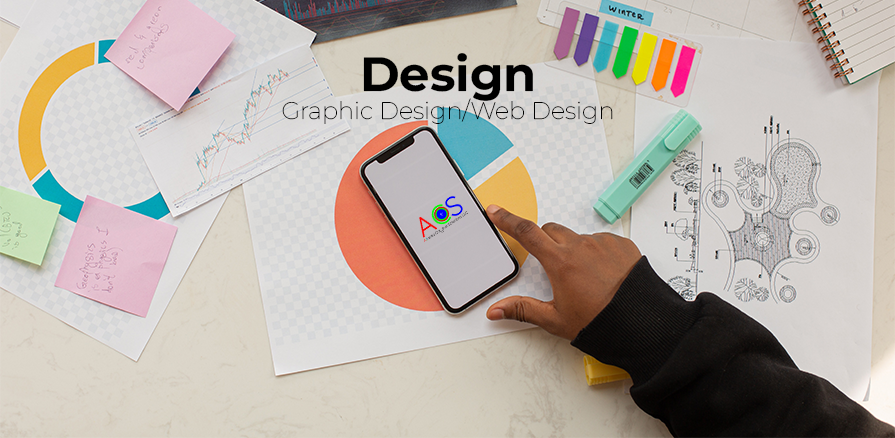
<style>
.page{position:relative;width:895px;height:438px}
.page>*{position:absolute;margin:0}
.t1{font:24px "Montserrat-Thin";color:#000000}
.t2{font:48px "MontserratRoman-Bold";color:#000000}
</style>
<div class="page">
<p class="t1" style="left:282px;top:53px;width:331px;height:71px;text-align:center"><span class="t2">Design<br></span>Graphic Design/Web Design</p>
</div>
